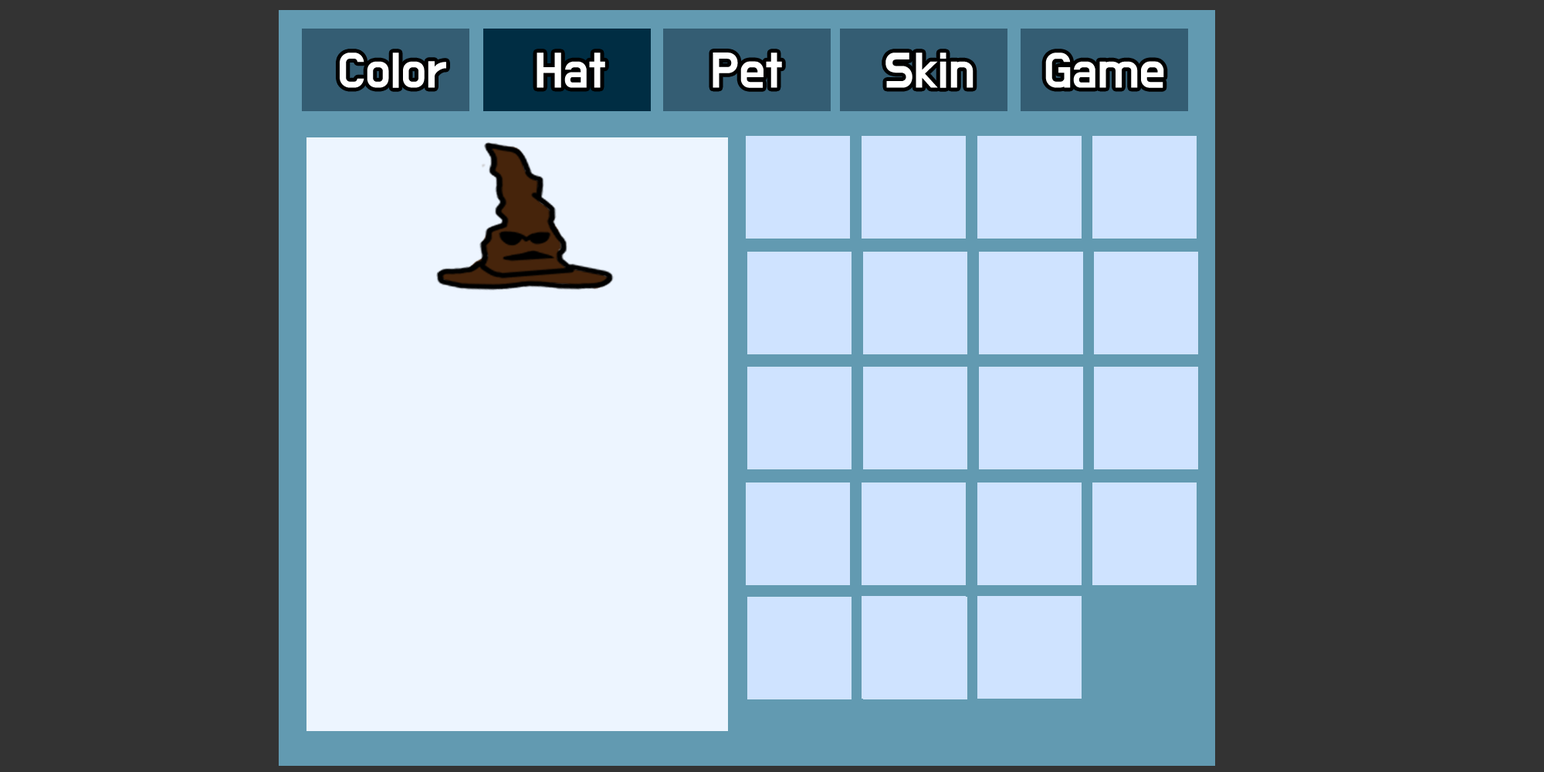
<style>
.page{position:relative;width:1544px;height:772px;background:#333333}
.page>*{position:absolute;margin:0}
.t1{font:41.2px "BMDoHyeon";color:#ffffff}
</style>
<div class="page">
<p class="t1" style="left:340px;top:53px;width:106px;height:35px">Color</p>
<p class="t1" style="left:537px;top:53px;width:68px;height:35px">Hat</p>
<p class="t1" style="left:713px;top:53px;width:69px;height:35px">Pet</p>
<p class="t1" style="left:886px;top:53px;width:88px;height:35px">Skin</p>
<p class="t1" style="left:1045px;top:53px;width:119px;height:35px">Game</p>
</div>
